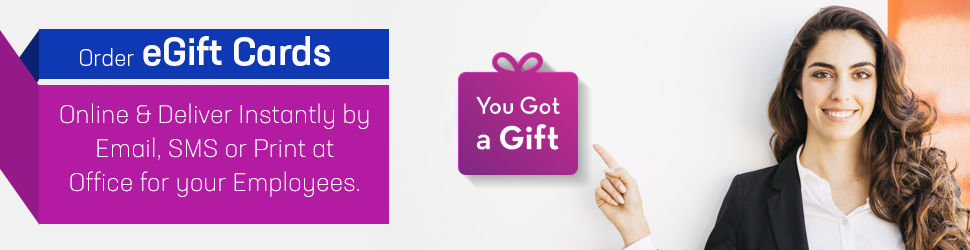
<style>
.page{position:relative;width:970px;height:250px}
.page>*{position:absolute;margin:0}
.t1{font:38.1px "NeusaNextStd-Medium";color:#ffffff}
.t2{font:23px "NeusaNextStd-Light";color:#ffffff}
.t3{font:25.3px/34px "NeusaNextStd-Light";color:#ffffff}
</style>
<div class="page">
<p class="t1" style="left:143px;top:36px;width:187px;height:30px">eGift Cards</p>
<p class="t2" style="left:80px;top:48px;width:54px;height:18px">Order</p>
<p class="t3" style="left:60px;top:103px;width:309px;height:94px;text-align:center">Online &amp; Deliver Instantly by<br>Email, SMS or Print at<br>Office for your Employees.</p>
</div>
